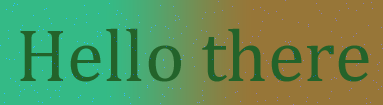
<style>
.page{position:relative;width:383px;height:105px;background:#977638}
.page>*{position:absolute;margin:0}
.t1{font:75px "Cambria";color:#23632a}
</style>
<div class="page">
<p class="t1" style="left:20px;top:28px;width:349px;height:54px">Hello there</p>
</div>
